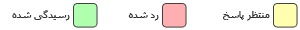
<style>
.page{position:relative;width:300px;height:30px;background:#ffffff}
.page>*{position:absolute;margin:0}
.t1{font:9.5px "Tahoma";color:#333132}
</style>
<div class="page">
<p class="t1" style="left:12px;top:10px;width:58px;height:11px">رسیدگی شده</p>
<p class="t1" style="left:128px;top:12px;width:31px;height:9px">رد شده</p>
<p class="t1" style="left:223px;top:11px;width:47px;height:10px">منتظر پاسخ</p>
</div>
